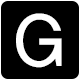
<style>
.page{position:relative;width:80px;height:80px;background:#000000}
.page>*{position:absolute;margin:0}
.t1{font:65px "BanglaSangamMN-Bold";color:#ffffff}
</style>
<div class="page">
<p class="t1" style="left:16px;top:13px;width:46px;height:55px">G</p>
</div>
